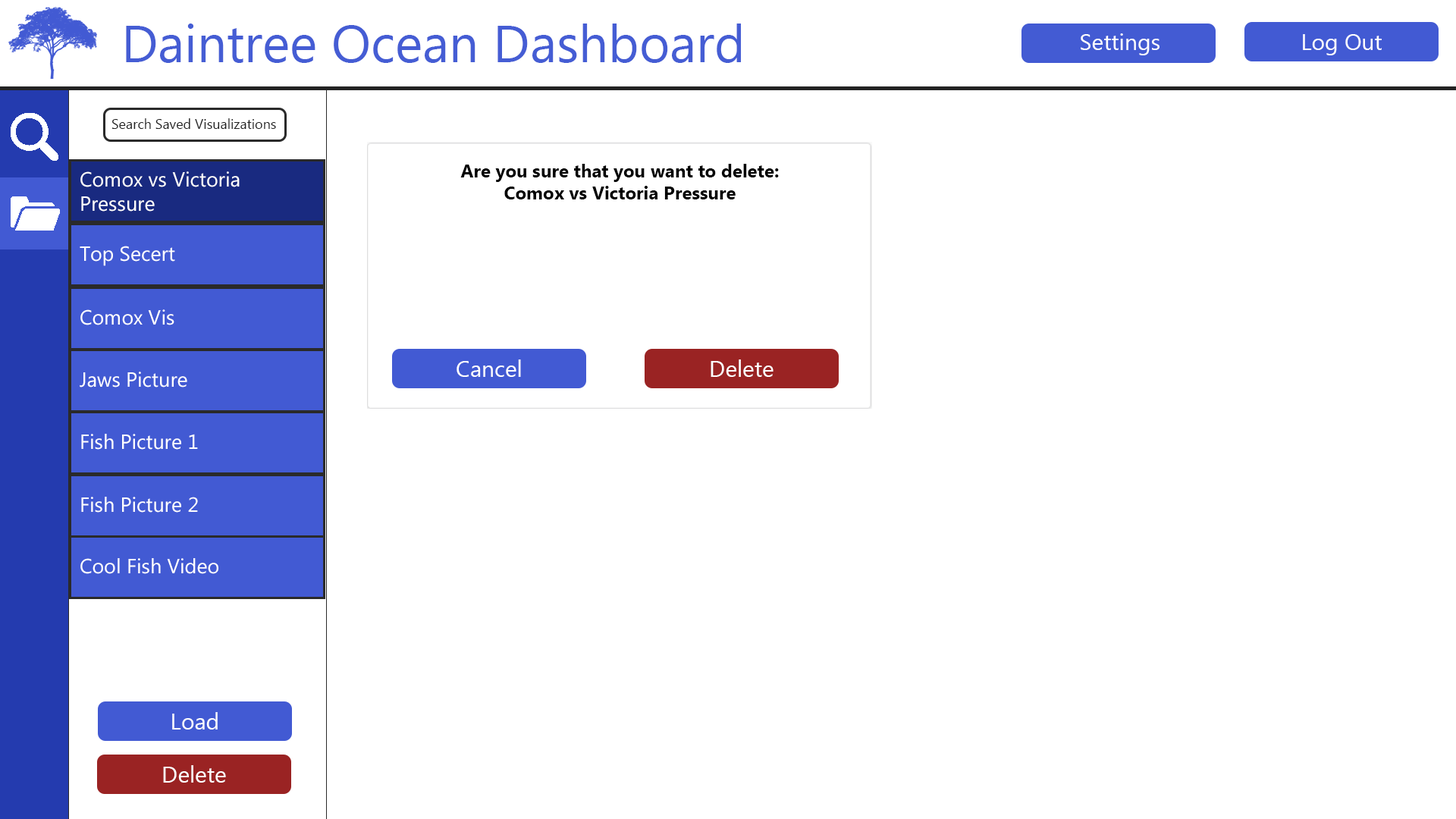
<style>
.page{position:relative;width:1456px;height:819px;background:#ffffff}
.page>*{position:absolute;margin:0}
.t1{font:52.3px "MyanmarText";color:#455dd4}
.t2{font:22.7px "MyanmarText";color:#ffffff}
.t3{font:13.6px "MyanmarText";color:#232323}
.t4{font:20.5px "MyanmarText";color:#ffffff}
.t5{font:18.2px "MyanmarText-Bold";color:#000000}
</style>
<div class="page">
<p class="t1" style="left:126px;top:24px;width:615px;height:39px">Daintree Ocean Dashboard</p>
<p class="t2" style="left:1081px;top:33px;width:78px;height:22px">Settings</p>
<p class="t2" style="left:1303px;top:34px;width:79px;height:21px">Log Out</p>
<p class="t3" style="left:111px;top:118px;width:165px;height:11px">Search Saved Visualizations</p>
<p class="t4" style="left:80px;top:171px;width:160px;height:41px">Comox vs Victoria <br>Pressure</p>
<p class="t5" style="left:460px;top:164px;width:319px;height:35px;text-align:center">Are you sure that you want to delete:<br>Comox vs Victoria Pressure</p>
<p class="t4" style="left:80px;top:246px;width:95px;height:20px">Top Secert</p>
<p class="t4" style="left:80px;top:309px;width:94px;height:16px">Comox Vis</p>
<p class="t2" style="left:457px;top:359px;width:64px;height:18px">Cancel</p>
<p class="t2" style="left:711px;top:359px;width:62px;height:18px">Delete</p>
<p class="t4" style="left:80px;top:372px;width:107px;height:16px">Jaws Picture</p>
<p class="t4" style="left:81px;top:434px;width:117px;height:16px">Fish Picture 1</p>
<p class="t4" style="left:81px;top:497px;width:117px;height:16px">Fish Picture 2</p>
<p class="t4" style="left:80px;top:558px;width:138px;height:16px">Cool Fish Video</p>
<p class="t2" style="left:172px;top:712px;width:46px;height:18px">Load</p>
<p class="t2" style="left:163px;top:765px;width:63px;height:18px">Delete</p>
</div>
